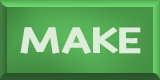
<style>
.page{position:relative;width:160px;height:80px}
.page>*{position:absolute;margin:0}
.t1{font:29.2px "KGBlankSpaceSolid";letter-spacing:-0.02em;color:#ddedd9;scale:1.37 1}
</style>
<div class="page">
<p class="t1" style="left:20px;top:27px;width:121px;height:27px">MAKE</p>
</div>
